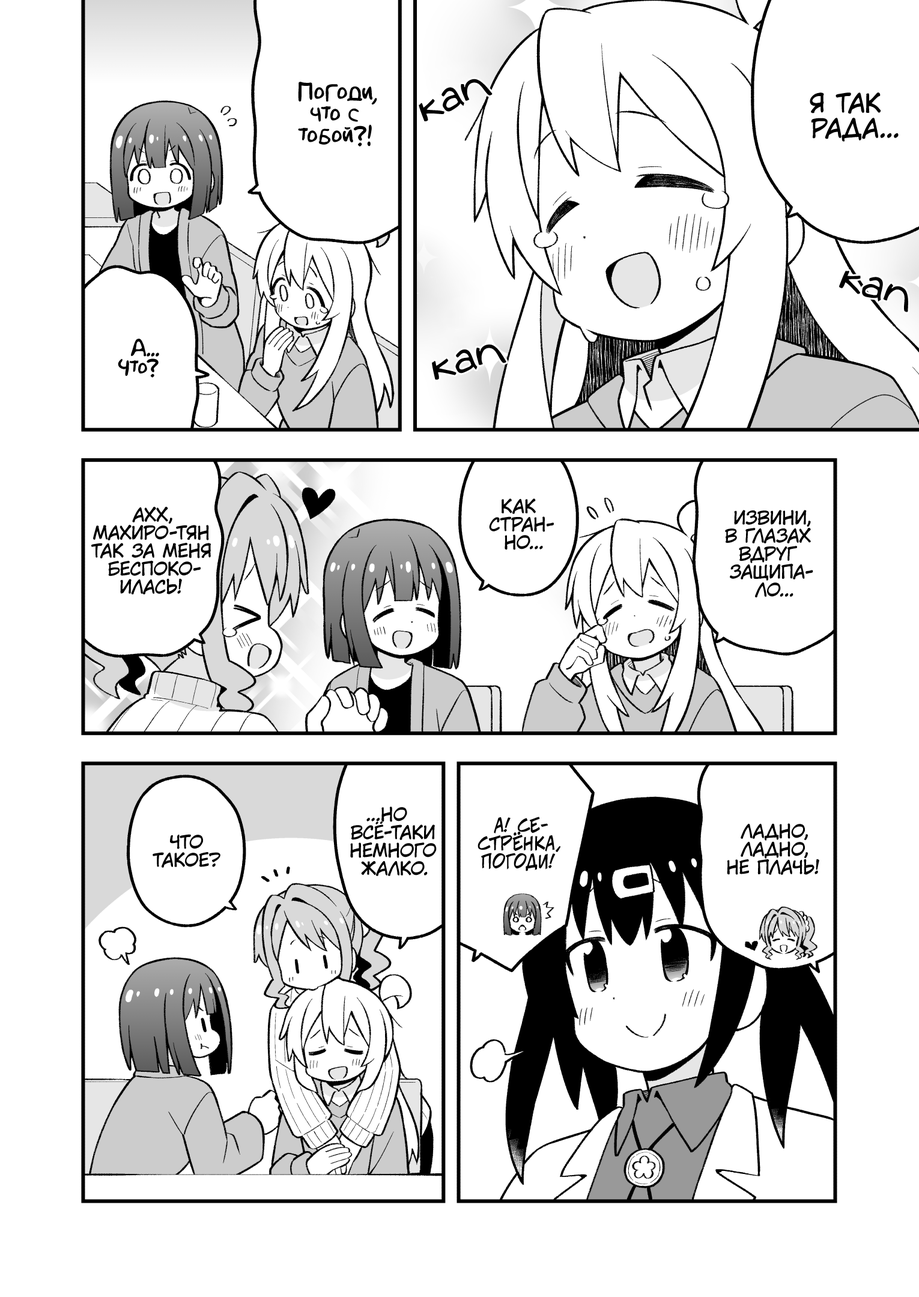
<style>
.page{position:relative;width:919px;height:1297px;background:#ffffff}
.page>*{position:absolute;margin:0}
.t1{font:21.6px "AkbarPlain";color:#000000}
.t2{font:43.2px "v_Augie";color:#000000}
.t3{font:25.2px "KuraiVoice2";color:#000000;text-transform:uppercase}
.t4{font:19.8px "AkbarPlain";color:#000000}
.t5{font:18px "KuraiVoice2";color:#000000;text-transform:uppercase}
.t6{font:18px "v_CCJeffCampbell";color:#000000;text-transform:uppercase}
</style>
<div class="page">
<p class="t1" style="left:298px;top:82px;width:79px;height:65px;text-align:center">Погоди,<br>что с<br>тобой?!</p>
<p class="t2" style="left:419px;top:79px;width:74px;height:42px;rotate:-21deg">кап</p>
<p class="t3" style="left:810px;top:93px;width:89px;height:49px;text-align:center">Я так<br>рада...</p>
<p class="t2" style="left:839px;top:270px;width:69px;height:42px;rotate:21deg">кап</p>
<p class="t4" style="left:118px;top:339px;width:41px;height:39px;text-align:center">А...<br>Что?</p>
<p class="t2" style="left:432px;top:344px;width:74px;height:36px;rotate:-13deg">кап</p>
<p class="t5" style="left:91px;top:507px;width:120px;height:88px;text-align:center">Ахх,<br>Махиро-тян<br>так за меня<br>беспоко-<br>илась!</p>
<p class="t5" style="left:489px;top:499px;width:65px;height:51px;text-align:center">Как<br>стран-<br>но...</p>
<p class="t5" style="left:725px;top:510px;width:88px;height:88px;text-align:center">Извини,<br>в глазах<br>вдруг<br>защипа-<br>ло...</p>
<p class="t5" style="left:350px;top:807px;width:87px;height:69px;text-align:center">...Но<br>всё-таки<br>немного<br>жалко.</p>
<p class="t6" style="left:478px;top:817px;width:83px;height:55px;text-align:center">А! Се-<br>стрёнка,<br>погоди!</p>
<p class="t5" style="left:727px;top:824px;width:92px;height:51px;text-align:center">Ладно,<br>ладно,<br>не плачь!</p>
<p class="t5" style="left:153px;top:834px;width:67px;height:34px;text-align:center">Что<br>такое?</p>
</div>
